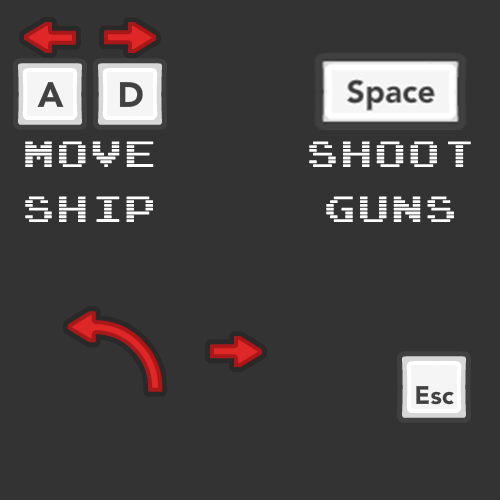
<style>
.page{position:relative;width:500px;height:500px;background:#333333}
.page>*{position:absolute;margin:0}
.t1{font:31px/55px "ArcadeInterlaced";letter-spacing:0.11em;color:#ffffff}
</style>
<div class="page">
<p class="t1" style="left:25px;top:141px;width:129px;height:81px;text-align:center">Move<br>Ship</p>
<p class="t1" style="left:309px;top:141px;width:162px;height:81px;text-align:center">Shoot<br>Guns</p>
</div>
